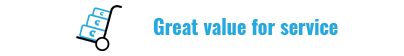
<style>
.page{position:relative;width:404px;height:56px;background:#ffffff}
.page>*{position:absolute;margin:0}
.t1{font:20px "Oswald-Bold";color:#24a8de}
</style>
<div class="page">
<p class="t1" style="left:153px;top:18px;width:185px;height:17px">Great value for service</p>
</div>
